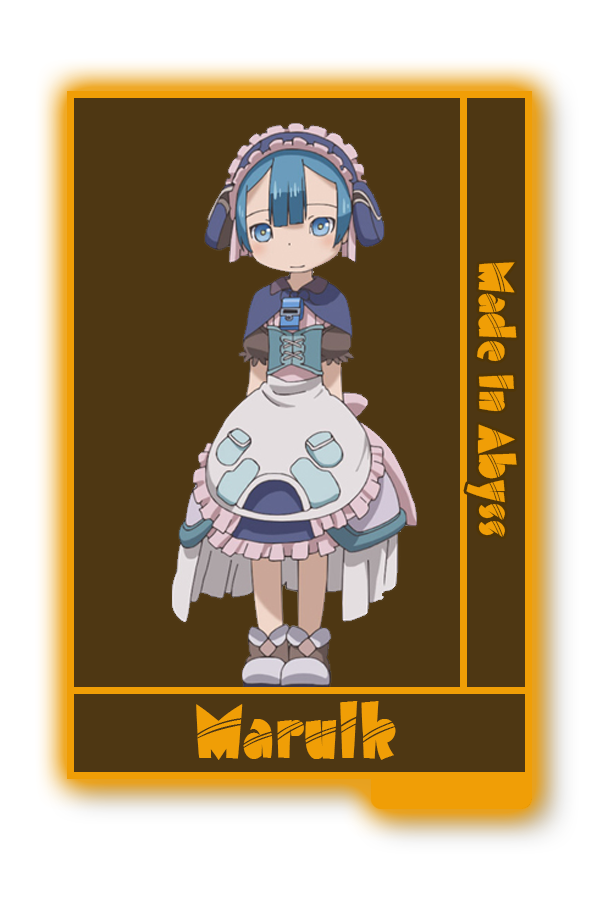
<style>
.page{position:relative;width:600px;height:900px;background:#4e3713}
.page>*{position:absolute;margin:0}
.t1{font:48.8px "AirmoleStripe";color:#f09e06}
.t2{font:75px "AirmoleStripe";color:#f09e06}
</style>
<div class="page">
<p class="t1" style="left:466px;top:262px;width:51px;height:275px;rotate:90deg">Made In Abyss</p>
<p class="t2" style="left:196px;top:701px;width:200px;height:59px">Marulk</p>
</div>
